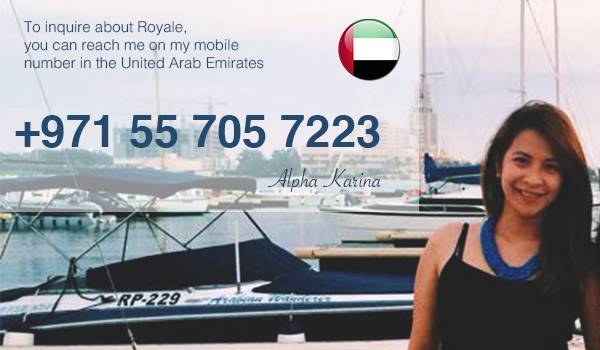
<style>
.page{position:relative;width:600px;height:350px}
.page>*{position:absolute;margin:0}
.t1{font:7.5px "Helvetica-Light";color:#264a6d}
.t2{font:22.4px "Helvetica-Bold";color:#264a6d}
.t3{font:14.1px "SavoyeLetPlain";color:#264a6d}
</style>
<div class="page">
<p class="t1" style="left:24px;top:21px;width:240px;height:48px">To inquire about Royale,<br>you can reach me on my mobile<br>number in the United Arab Emirates</p>
<p class="t2" style="left:15px;top:115px;width:365px;height:33px">+971 55 705 7223</p>
<p class="t3" style="left:267px;top:168px;width:114px;height:24px">Alpha Karina</p>
</div>
